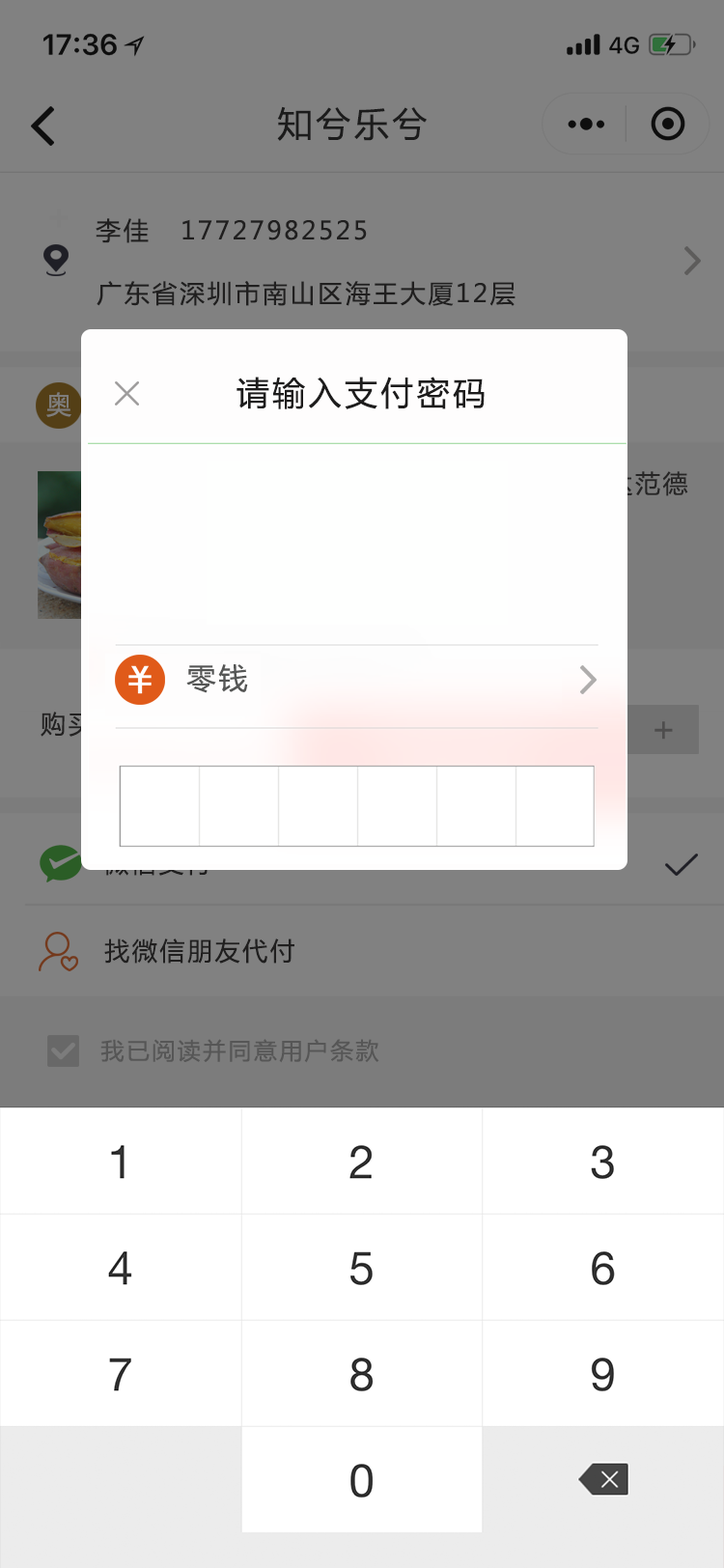
<style>
.page{position:relative;width:724px;height:1568px;background:#818181}
.page>*{position:absolute;margin:0}
.t1{font:34.8px "MicrosoftYaHei";letter-spacing:0.1em;color:#201f20}
.t2{font:25.1px "MicrosoftYaHei";letter-spacing:0.1em;color:#282727}
.t3{font:32.8px "MicrosoftYaHei";letter-spacing:0.1em;color:#1d1c1c}
.t4{font:25.1px "MicrosoftYaHei";letter-spacing:0.1em;color:#7e7d7b}
.t5{font:29px "MicrosoftYaHei";letter-spacing:0.1em;color:#555655}
.t6{font:34.8px "MicrosoftYaHei";letter-spacing:0.1em;color:#4e4d4d}
.t7{font:46.3px "MicrosoftYaHei";letter-spacing:0.1em;color:#ffeceb}
.t8{font:23.2px "MicrosoftYaHei";letter-spacing:0.1em;color:#565656}
</style>
<div class="page">
<p class="t1" style="left:277px;top:106px;width:150px;height:35px">知兮乐兮</p>
<p class="t2" style="left:96px;top:218px;width:271px;height:25px">李佳   17727982525</p>
<p class="t2" style="left:97px;top:281px;width:419px;height:25px">广东省深圳市南山区海王大厦12层</p>
<p class="t3" style="left:237px;top:377px;width:248px;height:32px">请输入支付密码</p>
<p class="t4" style="left:46px;top:392px;width:25px;height:25px">奥</p>
<p class="t5" style="left:186px;top:664px;width:62px;height:29px">零钱</p>
<p class="t6" style="left:655px;top:721px;width:18px;height:19px">+</p>
<p class="t7" style="left:492px;top:728px;width:15px;height:5px">-</p>
<p class="t2" style="left:104px;top:938px;width:190px;height:26px">找微信朋友代付</p>
<p class="t8" style="left:100px;top:1039px;width:279px;height:24px">我已阅读并同意用户条款</p>
</div>
